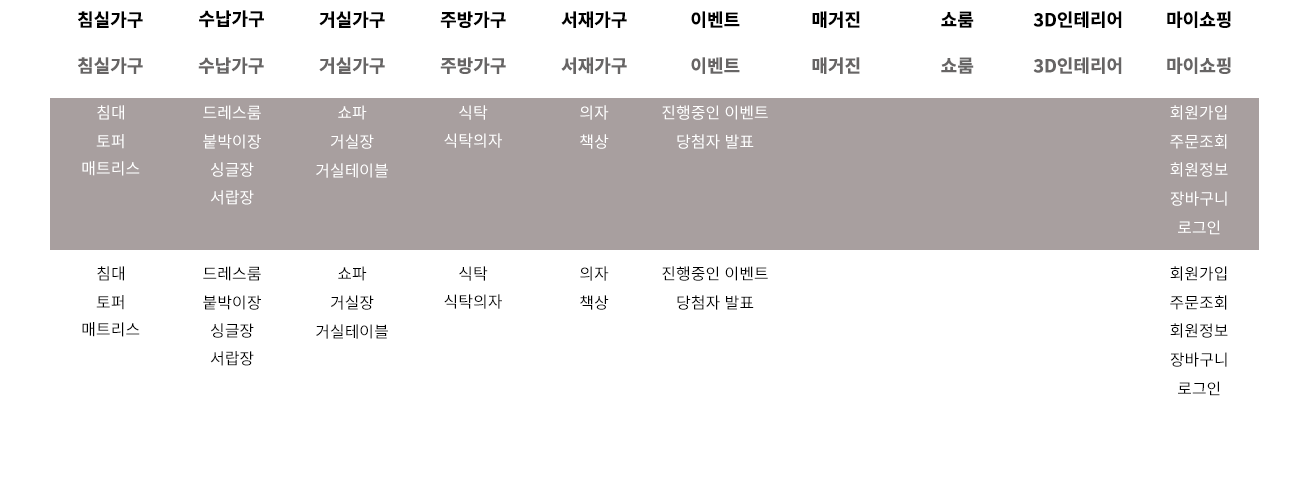
<style>
.page{position:relative;width:1300px;height:500px;background:#ffffff}
.page>*{position:absolute;margin:0}
.t1{font:18px "NotoSansKR-Bold";color:#000000}
.t2{font:18px "NotoSansKR-Bold";color:#676565}
.t3{font:16px "NotoSansKR-Regular";color:#ffffff}
.t4{font:16px "NotoSansKR-Regular";color:#000000}
</style>
<div class="page">
<p class="t1" style="left:78px;top:11px;width:65px;height:17px">침실가구</p>
<p class="t1" style="left:199px;top:10px;width:65px;height:18px">수납가구</p>
<p class="t1" style="left:319px;top:11px;width:66px;height:17px">거실가구</p>
<p class="t1" style="left:440px;top:11px;width:66px;height:17px">주방가구</p>
<p class="t1" style="left:561px;top:11px;width:66px;height:17px">서재가구</p>
<p class="t1" style="left:691px;top:11px;width:49px;height:17px">이벤트</p>
<p class="t1" style="left:812px;top:11px;width:48px;height:17px">매거진</p>
<p class="t1" style="left:941px;top:11px;width:33px;height:17px">쇼룸</p>
<p class="t1" style="left:1033px;top:11px;width:89px;height:17px">3D인테리어</p>
<p class="t1" style="left:1167px;top:11px;width:64px;height:17px">마이쇼핑</p>
<p class="t2" style="left:78px;top:57px;width:65px;height:17px">침실가구</p>
<p class="t2" style="left:198px;top:57px;width:66px;height:17px">수납가구</p>
<p class="t2" style="left:319px;top:57px;width:66px;height:17px">거실가구</p>
<p class="t2" style="left:440px;top:57px;width:66px;height:17px">주방가구</p>
<p class="t2" style="left:561px;top:57px;width:66px;height:17px">서재가구</p>
<p class="t2" style="left:691px;top:57px;width:49px;height:17px">이벤트</p>
<p class="t2" style="left:812px;top:57px;width:48px;height:17px">매거진</p>
<p class="t2" style="left:941px;top:57px;width:33px;height:17px">쇼룸</p>
<p class="t2" style="left:1033px;top:57px;width:89px;height:17px">3D인테리어</p>
<p class="t2" style="left:1167px;top:57px;width:64px;height:17px">마이쇼핑</p>
<p class="t3" style="left:97px;top:105px;width:27px;height:15px">침대</p>
<p class="t3" style="left:203px;top:105px;width:58px;height:15px">드레스룸</p>
<p class="t3" style="left:338px;top:105px;width:29px;height:15px">쇼파</p>
<p class="t3" style="left:459px;top:105px;width:29px;height:15px">식탁</p>
<p class="t3" style="left:580px;top:105px;width:29px;height:15px">의자</p>
<p class="t3" style="left:662px;top:105px;width:106px;height:15px">진행중인 이벤트</p>
<p class="t3" style="left:1170px;top:105px;width:57px;height:15px">회원가입</p>
<p class="t3" style="left:96px;top:134px;width:28px;height:15px">토퍼</p>
<p class="t3" style="left:203px;top:134px;width:58px;height:15px">붙박이장</p>
<p class="t3" style="left:331px;top:134px;width:43px;height:15px">거실장</p>
<p class="t3" style="left:444px;top:133px;width:58px;height:15px">식탁의자</p>
<p class="t3" style="left:580px;top:134px;width:29px;height:15px">책상</p>
<p class="t3" style="left:677px;top:134px;width:77px;height:15px">당첨자 발표</p>
<p class="t3" style="left:1170px;top:134px;width:57px;height:15px">주문조회</p>
<p class="t3" style="left:82px;top:161px;width:58px;height:15px">매트리스</p>
<p class="t3" style="left:211px;top:162px;width:43px;height:15px">싱글장</p>
<p class="t3" style="left:316px;top:163px;width:72px;height:15px">거실테이블</p>
<p class="t3" style="left:1170px;top:162px;width:58px;height:15px">회원정보</p>
<p class="t3" style="left:210px;top:190px;width:44px;height:15px">서랍장</p>
<p class="t3" style="left:1170px;top:191px;width:57px;height:15px">장바구니</p>
<p class="t3" style="left:1178px;top:220px;width:42px;height:15px">로그인</p>
<p class="t4" style="left:97px;top:266px;width:27px;height:15px">침대</p>
<p class="t4" style="left:203px;top:266px;width:58px;height:15px">드레스룸</p>
<p class="t4" style="left:338px;top:266px;width:29px;height:15px">쇼파</p>
<p class="t4" style="left:459px;top:266px;width:29px;height:15px">식탁</p>
<p class="t4" style="left:580px;top:266px;width:29px;height:15px">의자</p>
<p class="t4" style="left:662px;top:266px;width:106px;height:15px">진행중인 이벤트</p>
<p class="t4" style="left:1170px;top:266px;width:57px;height:15px">회원가입</p>
<p class="t4" style="left:444px;top:294px;width:58px;height:15px">식탁의자</p>
<p class="t4" style="left:96px;top:295px;width:28px;height:15px">토퍼</p>
<p class="t4" style="left:203px;top:295px;width:58px;height:15px">붙박이장</p>
<p class="t4" style="left:331px;top:295px;width:43px;height:15px">거실장</p>
<p class="t4" style="left:580px;top:295px;width:29px;height:15px">책상</p>
<p class="t4" style="left:677px;top:295px;width:77px;height:15px">당첨자 발표</p>
<p class="t4" style="left:1170px;top:295px;width:57px;height:15px">주문조회</p>
<p class="t4" style="left:82px;top:322px;width:58px;height:15px">매트리스</p>
<p class="t4" style="left:211px;top:323px;width:43px;height:15px">싱글장</p>
<p class="t4" style="left:316px;top:324px;width:72px;height:15px">거실테이블</p>
<p class="t4" style="left:1170px;top:323px;width:58px;height:15px">회원정보</p>
<p class="t4" style="left:210px;top:351px;width:44px;height:15px">서랍장</p>
<p class="t4" style="left:1170px;top:352px;width:57px;height:15px">장바구니</p>
<p class="t4" style="left:1178px;top:381px;width:42px;height:15px">로그인</p>
</div>
